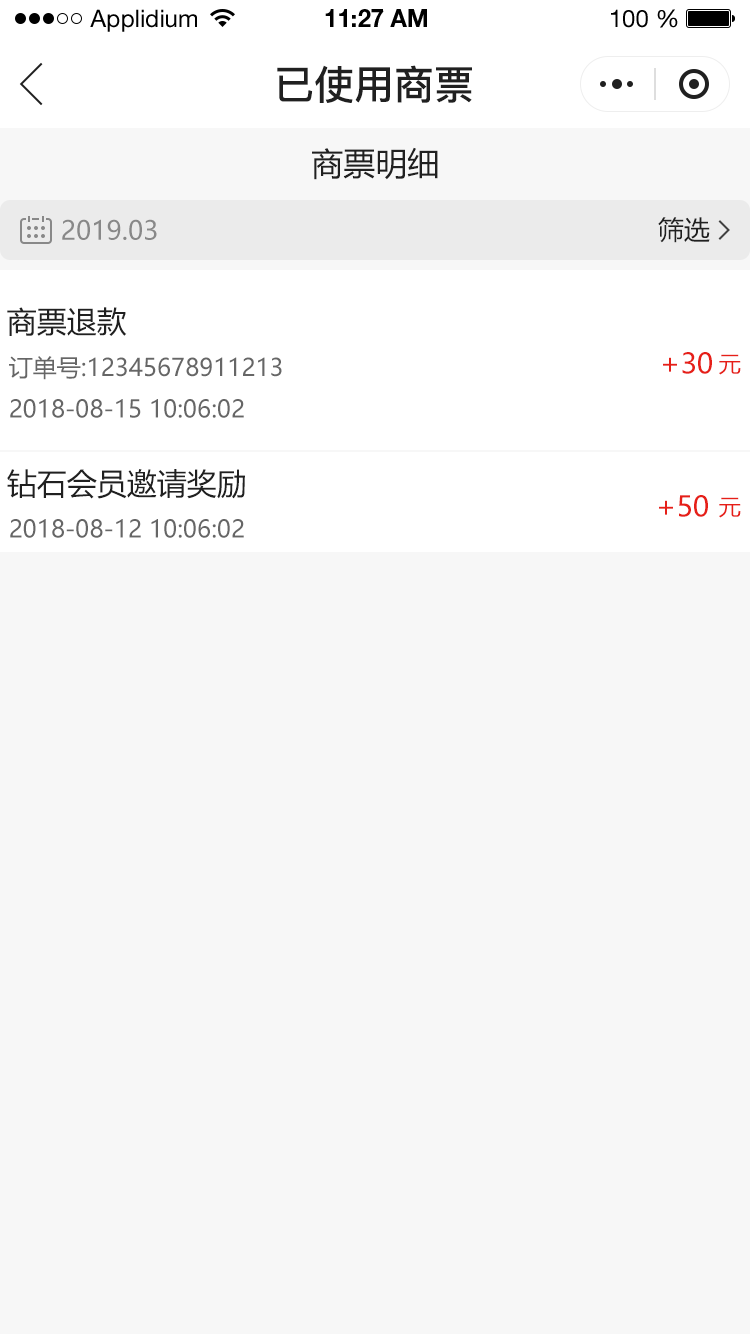
<style>
.page{position:relative;width:750px;height:1334px;background:#f7f7f7}
.page>*{position:absolute;margin:0}
.t1{font:24px "HelveticaNeueLTStd-Roman";color:#000000}
.t2{font:24px "HelveticaNeueLTStd-Bd";color:#000000}
.t3{font:40px "PingFang-SC-Bold";color:#202020;text-transform:uppercase}
.t4{font:32px "MicrosoftYaHei";color:#202020;text-transform:uppercase}
.t5{font:26px "MicrosoftYaHei";color:#888888;text-transform:uppercase}
.t6{font:26px "MicrosoftYaHei";color:#202020;text-transform:uppercase}
.t7{font:30px "MicrosoftYaHei";color:#202020;text-transform:uppercase}
.t8{font:28px "MicrosoftYaHei";color:#e61f18;text-transform:uppercase}
.t9{font:24px "MicrosoftYaHei";color:#666666;text-transform:uppercase}
.t10{font:22px "MicrosoftYaHei";color:#e61f18;text-transform:uppercase}
</style>
<div class="page">
<p class="t1" style="left:90px;top:9px;width:107px;height:23px">Applidium</p>
<p class="t2" style="left:325px;top:9px;width:102px;height:18px">11:27 AM</p>
<p class="t1" style="left:611px;top:9px;width:67px;height:19px">100 %</p>
<p class="t3" style="left:277px;top:65px;width:195px;height:38px">已使用商票</p>
<p class="t4" style="left:312px;top:147px;width:126px;height:33px">商票明细</p>
<p class="t5" style="left:62px;top:219px;width:95px;height:21px">2019.03</p>
<p class="t6" style="left:658px;top:217px;width:52px;height:26px">筛选</p>
<p class="t7" style="left:7px;top:307px;width:120px;height:29px">商票退款</p>
<p class="t8" style="left:663px;top:352px;width:49px;height:22px">+30</p>
<p class="t9" style="left:9px;top:356px;width:273px;height:24px">订单号:12345678911213</p>
<p class="t10" style="left:719px;top:354px;width:22px;height:21px">元</p>
<p class="t9" style="left:10px;top:399px;width:234px;height:19px">2018-08-15 10:06:02</p>
<p class="t7" style="left:7px;top:469px;width:238px;height:30px">钻石会员邀请奖励</p>
<p class="t8" style="left:659px;top:495px;width:49px;height:22px">+50</p>
<p class="t10" style="left:719px;top:497px;width:22px;height:21px">元</p>
<p class="t9" style="left:10px;top:519px;width:234px;height:19px">2018-08-12 10:06:02</p>
</div>
